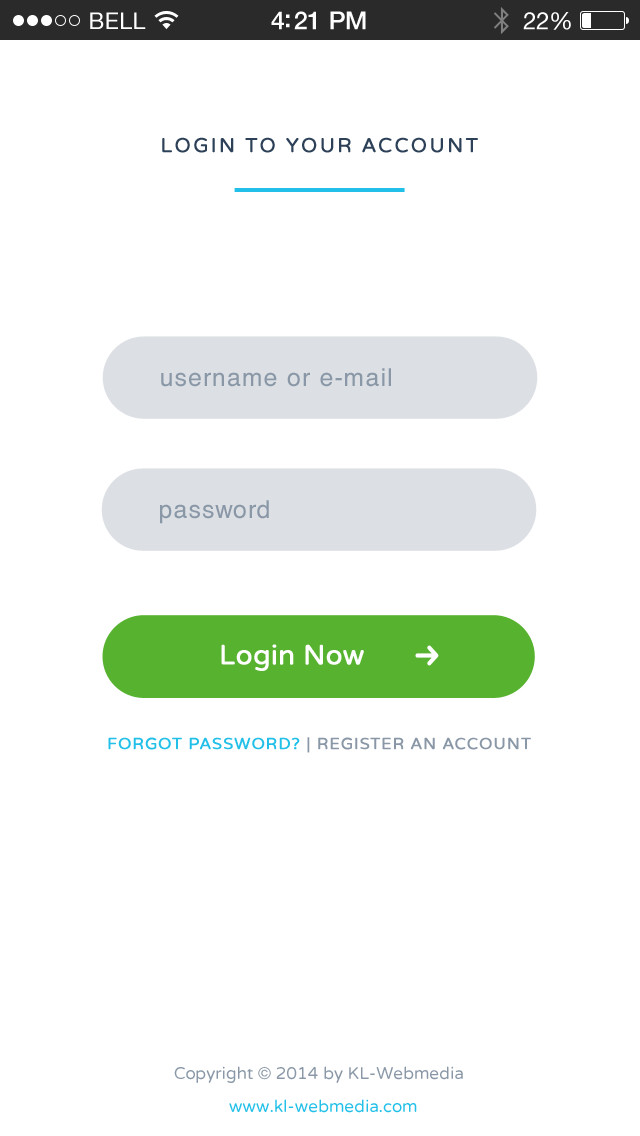
<style>
.page{position:relative;width:640px;height:1136px;background:#ffffff}
.page>*{position:absolute;margin:0}
.t1{font:23px "HelveticaNeue";letter-spacing:0.02em;color:#ffffff}
.t2{font:25px "HelveticaNeue-Medium";letter-spacing:-0.02em;color:#ffffff}
.t3{font:24px "HelveticaNeue";letter-spacing:-0.02em;color:#ffffff}
.t4{font:20px "VarelaRound";letter-spacing:0.1em;color:#2c4057;font-weight:bold}
.t5{font:24.7px "HelveticaCE-Regular";letter-spacing:0.05em;color:#8997a7}
.t6{font:27.1px "VarelaRound";color:#ffffff;font-weight:bold}
.t7{font:16px "VarelaRound";letter-spacing:0.05em;color:#8997a7;font-weight:bold}
.t8{font:16px "VarelaRound";letter-spacing:0.05em;color:#22c0e8;font-weight:bold}
.t9{font:17px/32.4px "VarelaRound";color:#8997a7}
.t10{font:17px/32.4px "VarelaRound";color:#22c0e8}
</style>
<div class="page">
<p class="t1" style="left:90px;top:12px;width:56px;height:17px">BELL</p>
<p class="t2" style="left:271px;top:11px;width:95px;height:19px">4:21 PM</p>
<p class="t3" style="left:523px;top:12px;width:48px;height:18px">22%</p>
<p class="t4" style="left:162px;top:137px;width:316px;height:16px">LOGIN TO YOUR ACCOUNT</p>
<p class="t5" style="left:161px;top:368px;width:230px;height:19px">username or e-mail</p>
<p class="t5" style="left:160px;top:500px;width:109px;height:24px">password</p>
<p class="t6" style="left:221px;top:644px;width:143px;height:27px">Login Now</p>
<p class="t7" style="left:108px;top:737px;width:423px;height:16px"><span class="t8">FORGOT PASSWORD?</span> | REGISTER AN ACCOUNT</p>
<p class="t9" style="left:174px;top:1066px;width:289px;height:47px;text-align:center">Copyright © 2014 by KL-Webmedia<br><span class="t10">  www.kl-webmedia.com</span></p>
</div>
